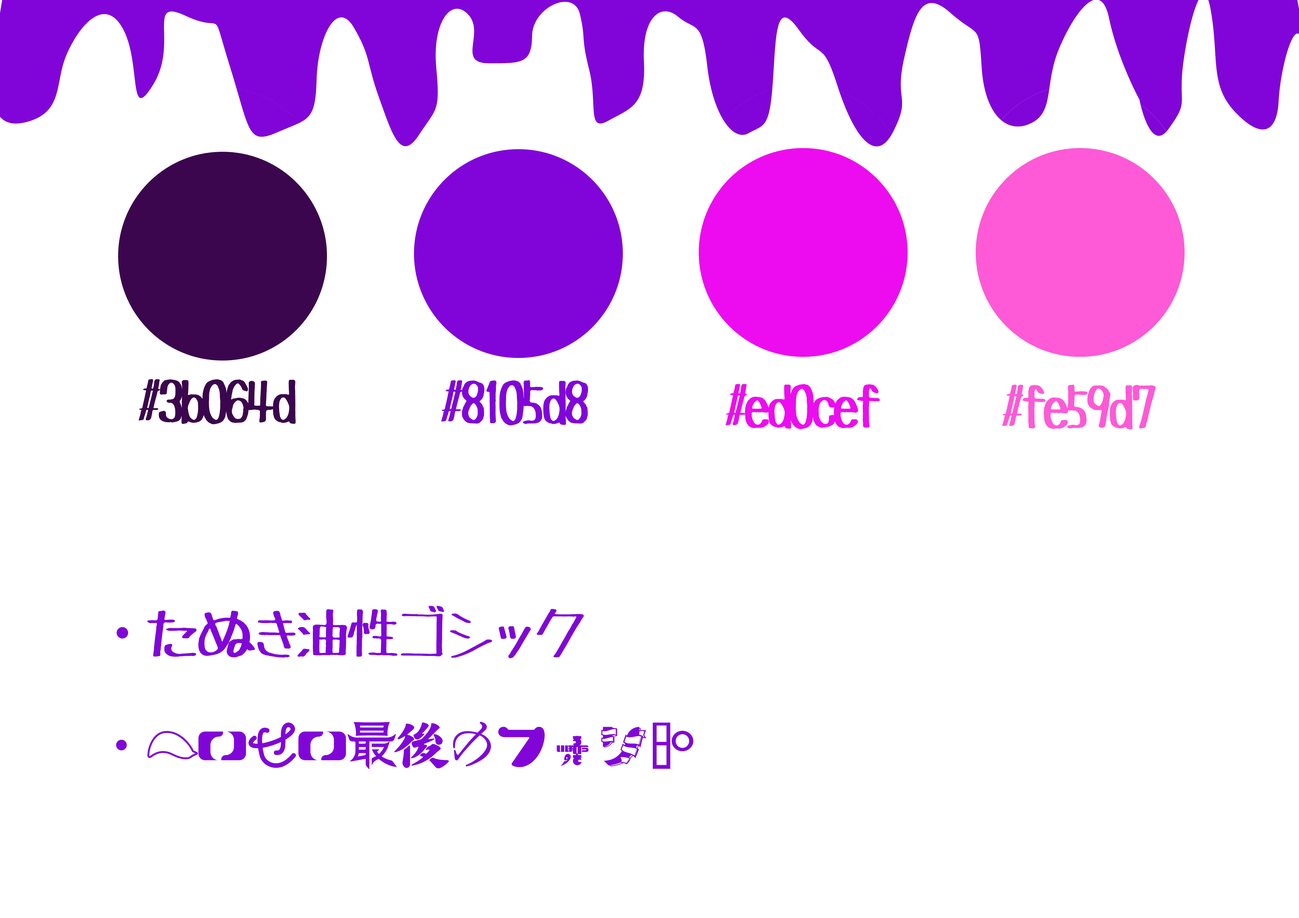
<style>
.page{position:relative;width:1299px;height:918px;background:#ffffff}
.page>*{position:absolute;margin:0}
.t1{font:55.5px "Tanuki-Permanent-Marker";letter-spacing:-0.1em;color:#3b064d}
.t2{font:55.5px "Tanuki-Permanent-Marker";letter-spacing:-0.1em;color:#8105d8}
.t3{font:55.5px "Tanuki-Permanent-Marker";letter-spacing:-0.1em;color:#ed0cef}
.t4{font:55.5px "Tanuki-Permanent-Marker";letter-spacing:-0.1em;color:#fe59d7}
.t5{font:55.5px "KozGoPr6N-Regular";letter-spacing:-0.1em;color:#8105d8}
.t6{font:55.5px "HeiseiLastFont";letter-spacing:-0.1em;color:#8105d8}
</style>
<div class="page">
<p class="t1" style="left:138px;top:379px;width:158px;height:46px">#3b064d</p>
<p class="t2" style="left:441px;top:380px;width:147px;height:46px">#8105d8</p>
<p class="t3" style="left:725px;top:384px;width:155px;height:45px">#ed0cef</p>
<p class="t4" style="left:1002px;top:385px;width:153px;height:45px">#fe59d7</p>
<p class="t2" style="left:117px;top:606px;width:467px;height:53px"><span class="t5">・</span>たぬき油性ゴシック</p>
<p class="t6" style="left:116px;top:722px;width:577px;height:48px">・へいせい最後のフォント</p>
</div>
